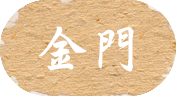
<style>
.page{position:relative;width:176px;height:96px}
.page>*{position:absolute;margin:0}
.t1{font:54px "DFXingKai-W5-WIN-BF";color:#ffffff}
</style>
<div class="page">
<p class="t1" style="left:39px;top:26px;width:95px;height:46px">金門</p>
</div>
